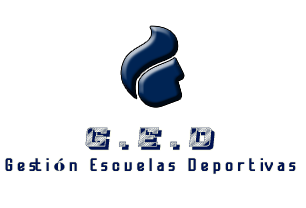
<style>
.page{position:relative;width:306px;height:208px;background:#ffffff}
.page>*{position:absolute;margin:0}
.t1{font:18px "Futurama-Bold";letter-spacing:0.2em;color:#011353;scale:1.1 1}
.t2{font:32.7px "Gabella-Regular";letter-spacing:0.2em;color:#011353;scale:1.1 1}
.t3{font:18px "Elephant-Regular";letter-spacing:0.2em;color:#011353;scale:1.1 1}
.t4{font:18px "Futurama-Bold";letter-spacing:0.025em;color:#011353;scale:1.1 1}
</style>
<div class="page">
<p class="t1" style="left:5px;top:127px;width:291px;height:47px;text-align:center"><span class="t2">G.E.D<br></span>Gesti<span class="t3">ó</span>n Escuelas Depor<span class="t4">t i</span>vas</p>
</div>
